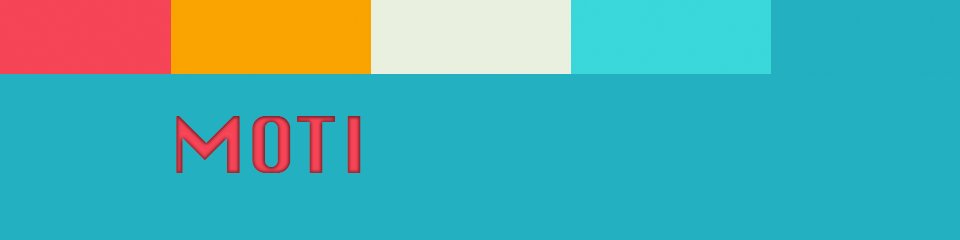
<style>
.page{position:relative;width:960px;height:240px;background:#23b0c0}
.page>*{position:absolute;margin:0}
.t1{font:76px "Silom"}
</style>
<div class="page">
<p class="t1" style="left:176px;top:116px;width:185px;height:57px">MOTI</p>
</div>
